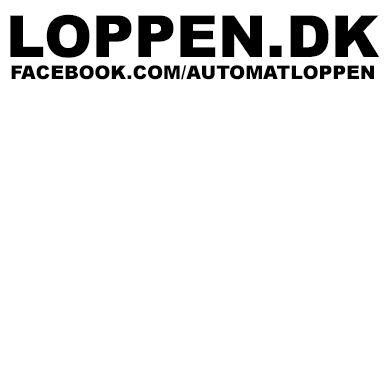
<style>
.page{position:relative;width:384px;height:384px;background:#ffffff}
.page>*{position:absolute;margin:0}
.t1{font:19px "Arial-Black";color:#000000}
.t2{font:58px "Arial-Black";color:#000000}
</style>
<div class="page">
<p class="t1" style="left:10px;top:14px;width:370px;height:66px;text-align:center"><span class="t2">LOPPEN.DK<br></span>FACEBOOK.COM/AUTOMATLOPPEN</p>
</div>
